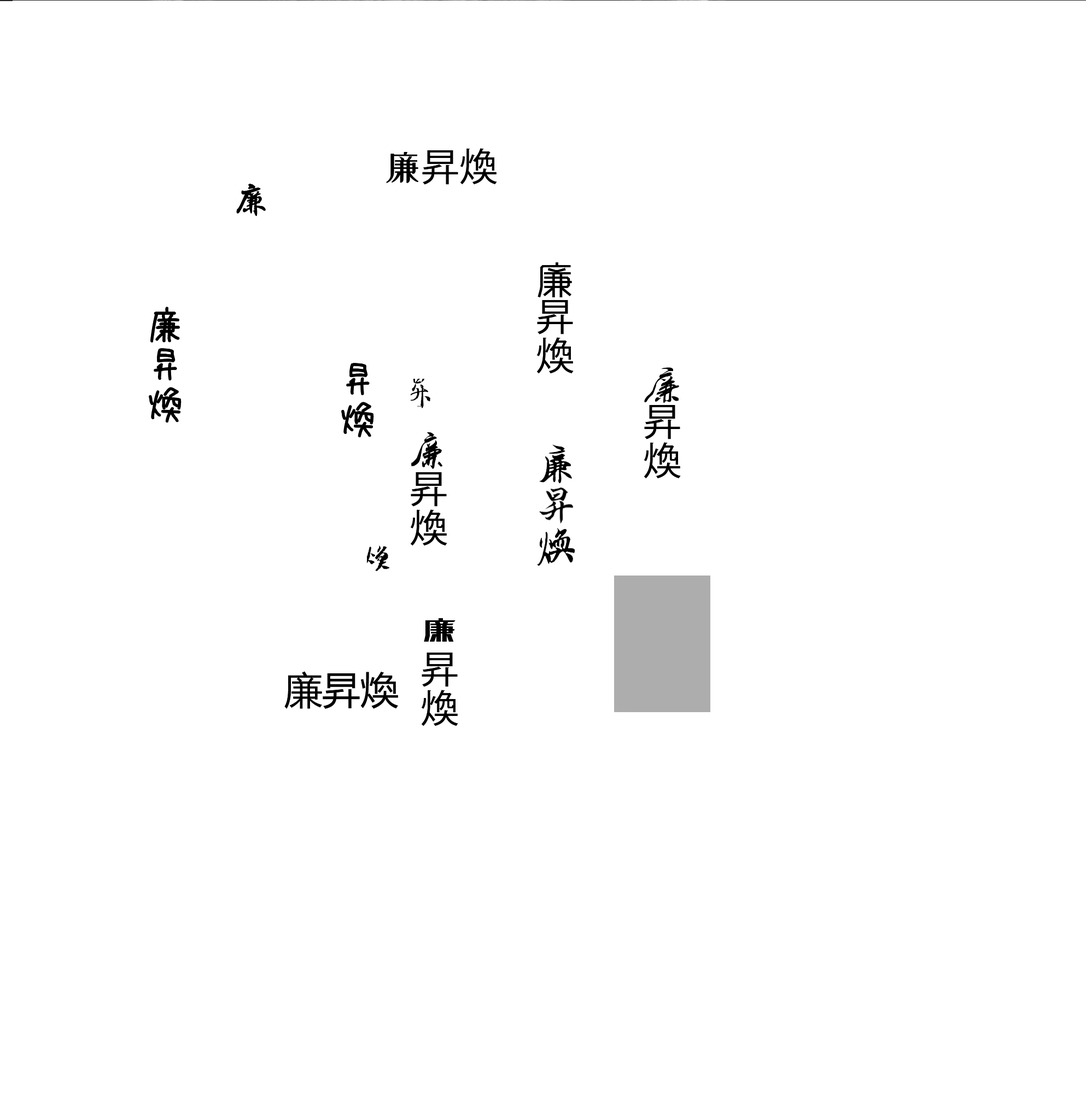
<style>
.page{position:relative;width:1086px;height:1098px;background:#ffffff}
.page>*{position:absolute;margin:0}
.t1{font:38.3px "KozGoPr6N-Regular";letter-spacing:-0.01em;color:#000000}
.t2{font:38.3px "xiaowei";letter-spacing:-0.01em;color:#000000}
.t3{font:38.3px "SunYatsenHsingshu-";letter-spacing:-0.01em;color:#000000}
.t4{font:38.3px/19.7px "KozGoPr6N-Regular";letter-spacing:-0.01em;color:#000000}
.t5{font:38.3px/19.7px "ZQKZYT";letter-spacing:-0.01em;color:#000000}
.t6{font:38.3px/19.7px "STHeitiTC-Light";letter-spacing:-0.01em;color:#000000}
.t7{font:38.3px/19.7px "SunYatsenHsingshu-";letter-spacing:-0.01em;color:#000000}
.t8{font:38.3px/19.7px "2012-";letter-spacing:-0.01em;color:#000000}
.t9{font:38.3px/19.7px "-";letter-spacing:-0.01em;color:#000000}
.t10{font:38.3px/19.7px "zcool-gdh";letter-spacing:-0.01em;color:#000000}
.t11{font:38.3px "MicrosoftYaHei";letter-spacing:-0.01em;color:#000000}
</style>
<div class="page">
<p class="t1" style="left:386px;top:148px;width:111px;height:36px"><span class="t2">廉</span>昇煥</p>
<p class="t3" style="left:236px;top:183px;width:30px;height:33px">廉</p>
<p class="t4" style="left:537px;top:262px;width:36px;height:111px"><span class="t5">廉<br><br></span>昇<br><br>煥</p>
<p class="t6" style="left:149px;top:306px;width:32px;height:117px">廉<br><br>昇<br><br>煥</p>
<p class="t6" style="left:341px;top:362px;width:33px;height:75px"><span class="t7"><br><br></span>昇<br><br>煥</p>
<p class="t4" style="left:644px;top:367px;width:37px;height:111px"><span class="t8">廉<br><br></span>昇<br><br>煥</p>
<p class="t4" style="left:411px;top:431px;width:36px;height:115px"><span class="t9">廉<br><br></span>昇<br><br>煥</p>
<p class="t4" style="left:421px;top:618px;width:37px;height:108px"><span class="t10">廉<br><br></span>昇<br><br>煥</p>
<p class="t11" style="left:284px;top:671px;width:114px;height:38px">廉昇煥</p>
</div>
